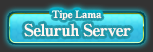
<style>
.page{position:relative;width:153px;height:52px}
.page>*{position:absolute;margin:0}
.t1{font:10px "RyuminPro-ExBold";letter-spacing:-0.04em;color:#fff6f1}
.t2{font:16px "RyuminPro-ExBold";letter-spacing:-0.04em;color:#fff6f1}
</style>
<div class="page">
<p class="t1" style="left:51px;top:10px;width:51px;height:10px">Tipe Lama</p>
<p class="t2" style="left:24px;top:23px;width:107px;height:14px">Seluruh Server</p>
</div>
